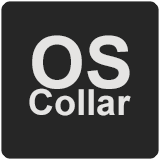
<style>
.page{position:relative;width:160px;height:160px;background:#262626}
.page>*{position:absolute;margin:0}
.t1{font:72px "Arial-BoldMT";color:#e5e4e3}
.t2{font:36px "Arial-BoldMT";color:#e5e4e3}
</style>
<div class="page">
<p class="t1" style="left:32px;top:35px;width:98px;height:54px">OS</p>
<p class="t2" style="left:29px;top:88px;width:102px;height:28px">Collar</p>
</div>
